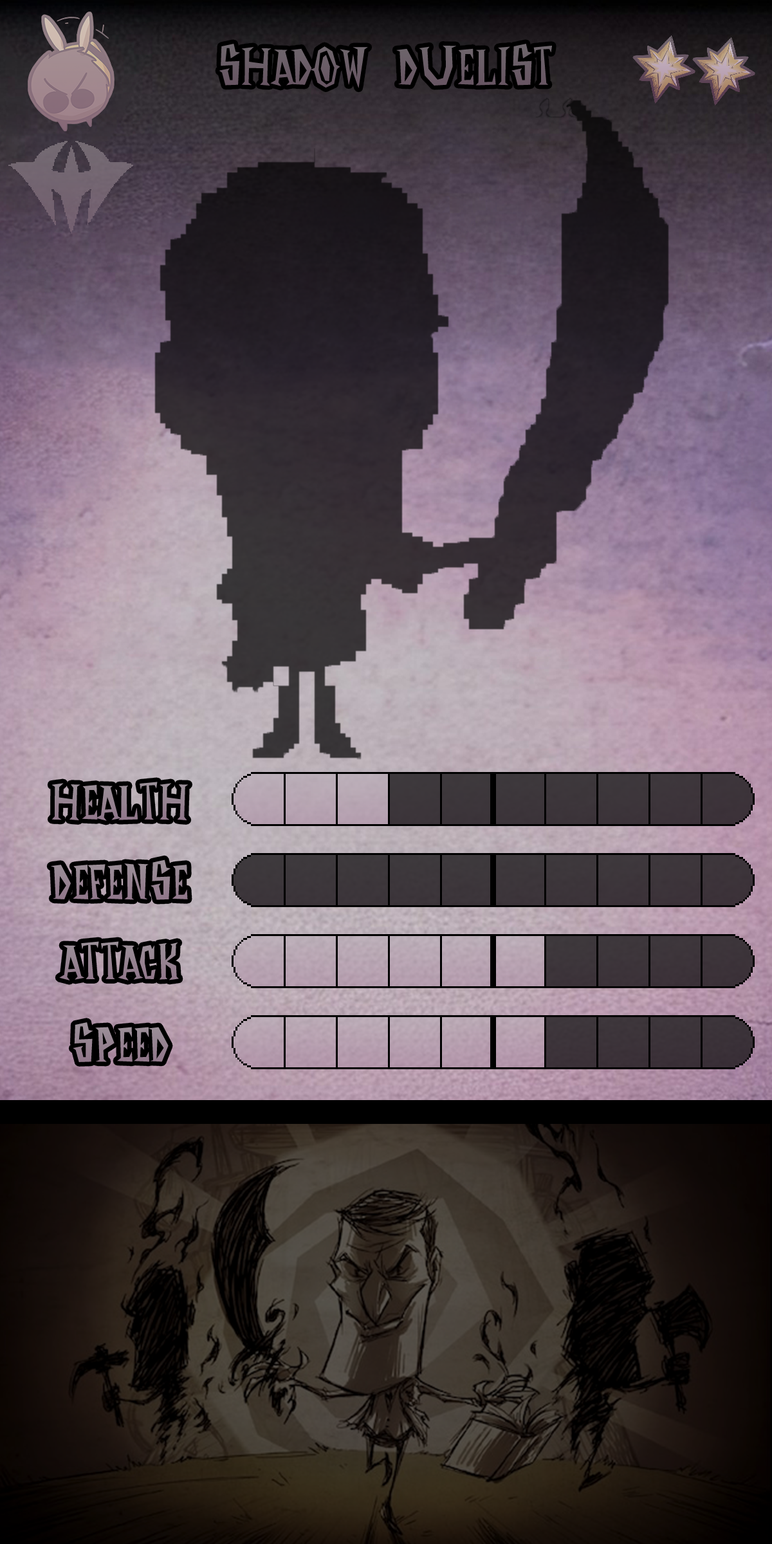
<style>
.page{position:relative;width:772px;height:1544px}
.page>*{position:absolute;margin:0}
.t1{font:96.5px "DontStarveNameFont";color:#6a5d67}
.t2{font:92.7px "DontStarveNameFont";color:#968391}
</style>
<div class="page">
<p class="t1" style="left:219px;top:44px;width:333px;height:44px">Shadow Duelist</p>
<p class="t2" style="left:51px;top:782px;width:138px;height:39px">Health</p>
<p class="t2" style="left:51px;top:860px;width:137px;height:40px">Defense</p>
<p class="t2" style="left:59px;top:941px;width:120px;height:40px">Attack</p>
<p class="t2" style="left:73px;top:1022px;width:96px;height:40px">Speed</p>
</div>
